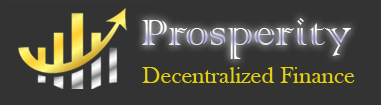
<style>
.page{position:relative;width:381px;height:105px;background:#333333}
.page>*{position:absolute;margin:0}
.t1{font:48px "ColonnaMT"}
.t2{font:24px "BaskOldFace";color:#e2d00d}
</style>
<div class="page">
<p class="t1" style="left:142px;top:18px;width:209px;height:41px">Prosperity</p>
<p class="t2" style="left:142px;top:67px;width:213px;height:16px">Decentralized Finance</p>
</div>
